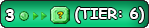
<style>
.page{position:relative;width:149px;height:28px}
.page>*{position:absolute;margin:0}
.t1{font:12px "ComicSansMS-Bold";color:#ffffff}
.t2{font:14.7px "ComicSansMS-Bold";color:#ffffff}
</style>
<div class="page">
<p class="t1" style="left:5px;top:9px;width:9px;height:12px">3</p>
<p class="t2" style="left:75px;top:7px;width:69px;height:16px">(TIER: 6)</p>
</div>
